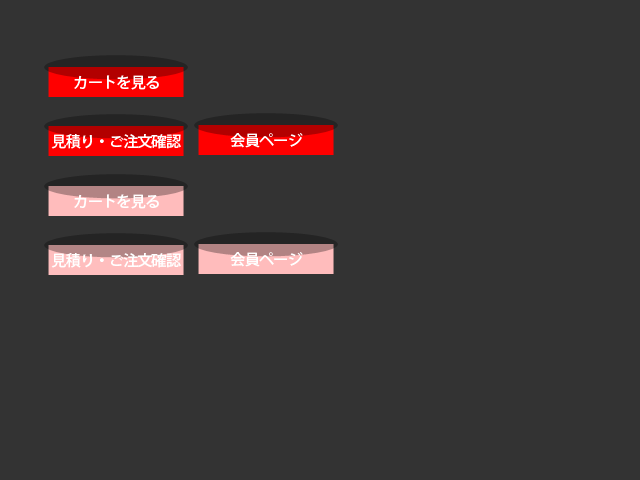
<style>
.page{position:relative;width:640px;height:480px;background:#333333}
.page>*{position:absolute;margin:0}
.t1{font:15.1px "KozGoPro-Medium";letter-spacing:-0.05em;color:#ffffff}
</style>
<div class="page">
<p class="t1" style="left:74px;top:75px;width:85px;height:15px">カートを見る</p>
<p class="t1" style="left:51px;top:134px;width:130px;height:15px">見積り・ご注文確認</p>
<p class="t1" style="left:230px;top:133px;width:73px;height:15px">会員ページ</p>
<p class="t1" style="left:74px;top:194px;width:85px;height:15px">カートを見る</p>
<p class="t1" style="left:51px;top:253px;width:130px;height:15px">見積り・ご注文確認</p>
<p class="t1" style="left:230px;top:252px;width:73px;height:15px">会員ページ</p>
</div>
